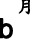
<style>
.page{position:relative;width:30px;height:39px;background:#ffffff}
.page>*{position:absolute;margin:0}
.t1{font:18px "DFKaiShu-SB-Estd-BF";color:#000000;font-weight:bold}
.t2{font:27px "ArialMT";color:#000000;font-weight:bold}
</style>
<div class="page">
<p class="t1" style="left:18px;top:0px;width:13px;height:15px">月</p>
<p class="t2" style="left:0px;top:18px;width:13px;height:21px">b</p>
</div>
